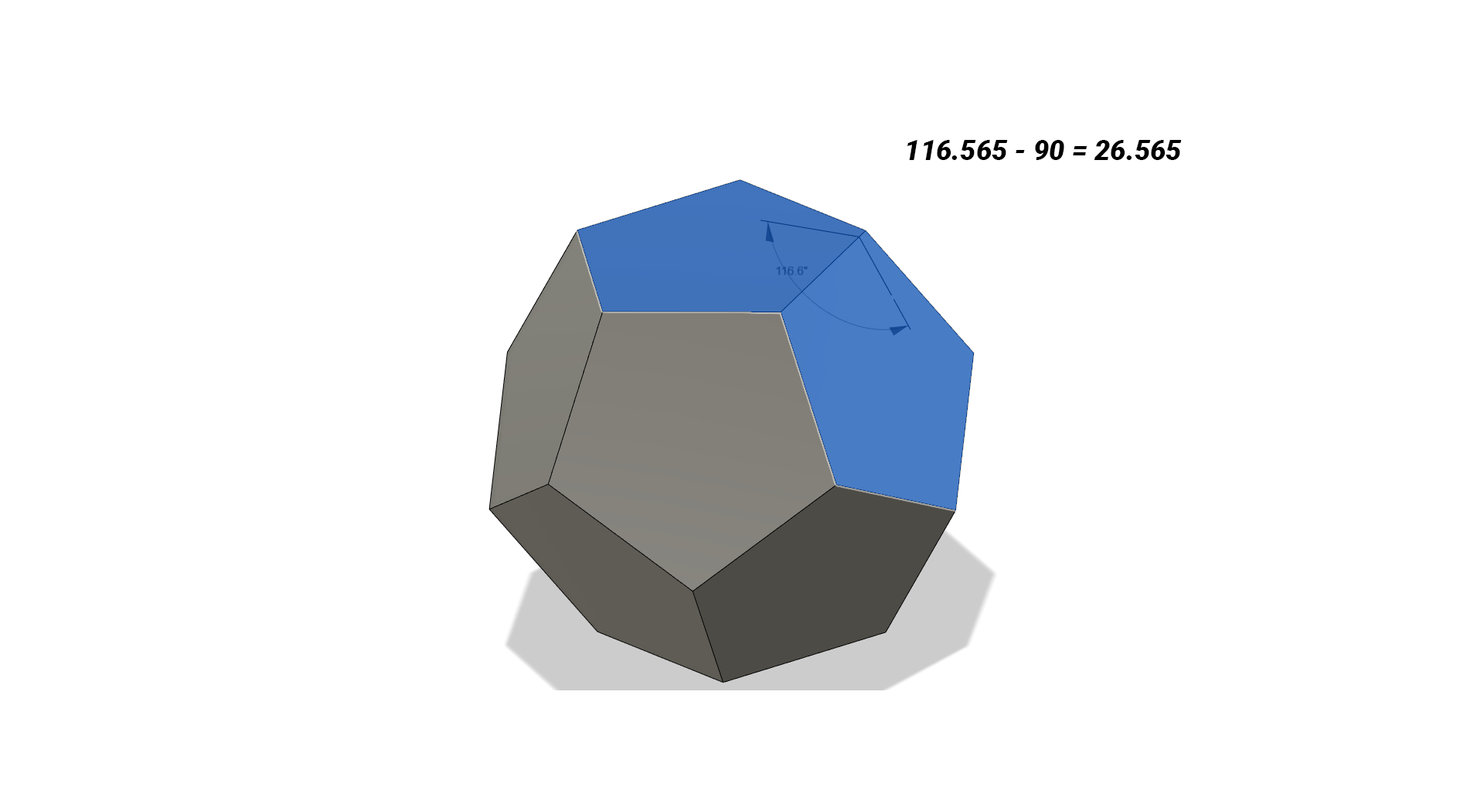
<style>
.page{position:relative;width:1484px;height:804px;background:#ffffff}
.page>*{position:absolute;margin:0}
.t1{font:27.8px "Roboto-BlackItalic";color:#000000}
</style>
<div class="page">
<p class="t1" style="left:907px;top:140px;width:275px;height:20px">116.565 - 90 = 26.565</p>
</div>
